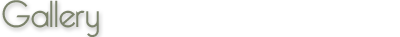
<style>
.page{position:relative;width:400px;height:37px;background:#ffffff}
.page>*{position:absolute;margin:0}
.t1{font:36.8px "BelleroseLight";color:#7c836c}
</style>
<div class="page">
<p class="t1" style="left:2px;top:0px;width:97px;height:37px">Gallery</p>
</div>
